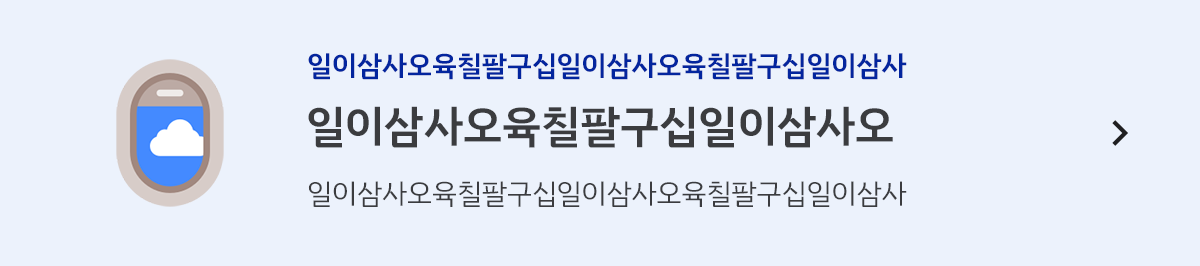
<style>
.page{position:relative;width:1200px;height:266px;background:#ecf2fc}
.page>*{position:absolute;margin:0}
.t1{font:28px "IBMPlexSansKR-SemiBold";color:#03259e}
.t2{font:44px "IBMPlexSansKR-SemiBold";color:#3b3c3f}
.t3{font:28px "IBMPlexSansKR-Regular";color:#3b3c3f}
</style>
<div class="page">
<p class="t1" style="left:308px;top:53px;width:599px;height:27px">일이삼사오육칠팔구십일이삼사오육칠팔구십일이삼사</p>
<p class="t2" style="left:308px;top:106px;width:585px;height:42px">일이삼사오육칠팔구십일이삼사오</p>
<p class="t3" style="left:308px;top:181px;width:599px;height:26px">일이삼사오육칠팔구십일이삼사오육칠팔구십일이삼사</p>
</div>
